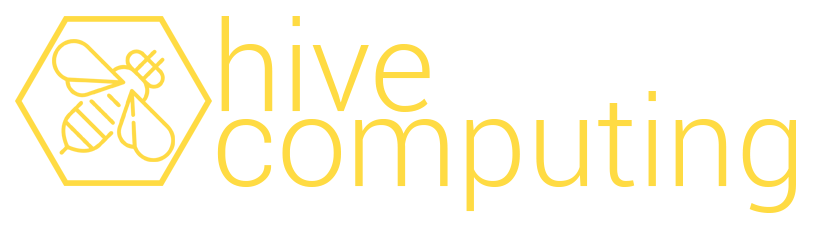
<style>
.page{position:relative;width:826px;height:235px;background:#ffffff}
.page>*{position:absolute;margin:0}
.t1{font:125px/75px "Roboto-Light";color:#ffdb43}
</style>
<div class="page">
<p class="t1" style="left:217px;top:16px;width:579px;height:197px">hive<br>computing</p>
</div>
